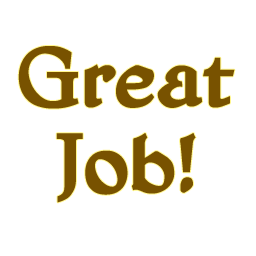
<style>
.page{position:relative;width:256px;height:256px;background:#ffffff}
.page>*{position:absolute;margin:0}
.t1{font:120px/86px "HoneyMeadBB-Bold";color:#775100}
</style>
<div class="page">
<p class="t1" style="left:18px;top:46px;width:217px;height:157px;text-align:center">Great<br>Job!</p>
</div>
